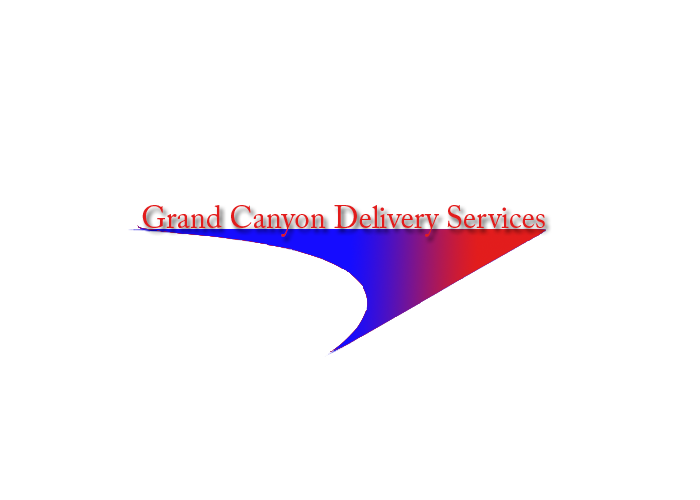
<style>
.page{position:relative;width:700px;height:500px;background:#ffffff}
.page>*{position:absolute;margin:0}
.t1{font:31.7px "ACaslonPro-Regular";color:#e21c1c;scale:0.96 1}
</style>
<div class="page">
<p class="t1" style="left:142px;top:205px;width:403px;height:32px">Grand Canyon Delivery Services</p>
</div>
